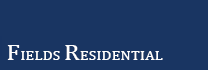
<style>
.page{position:relative;width:208px;height:70px;background:#193562}
.page>*{position:absolute;margin:0}
.t1{font:13.1px "Cambria";letter-spacing:0.02em;color:#ffffff;scale:1.14 1}
.t2{font:21.8px "Cambria";letter-spacing:0.02em;color:#ffffff;scale:1.14 1}
</style>
<div class="page">
<p class="t1" style="left:7px;top:45px;width:156px;height:15px"><span class="t2">F</span>IELDS <span class="t2">R</span>ESIDENTIAL</p>
</div>
